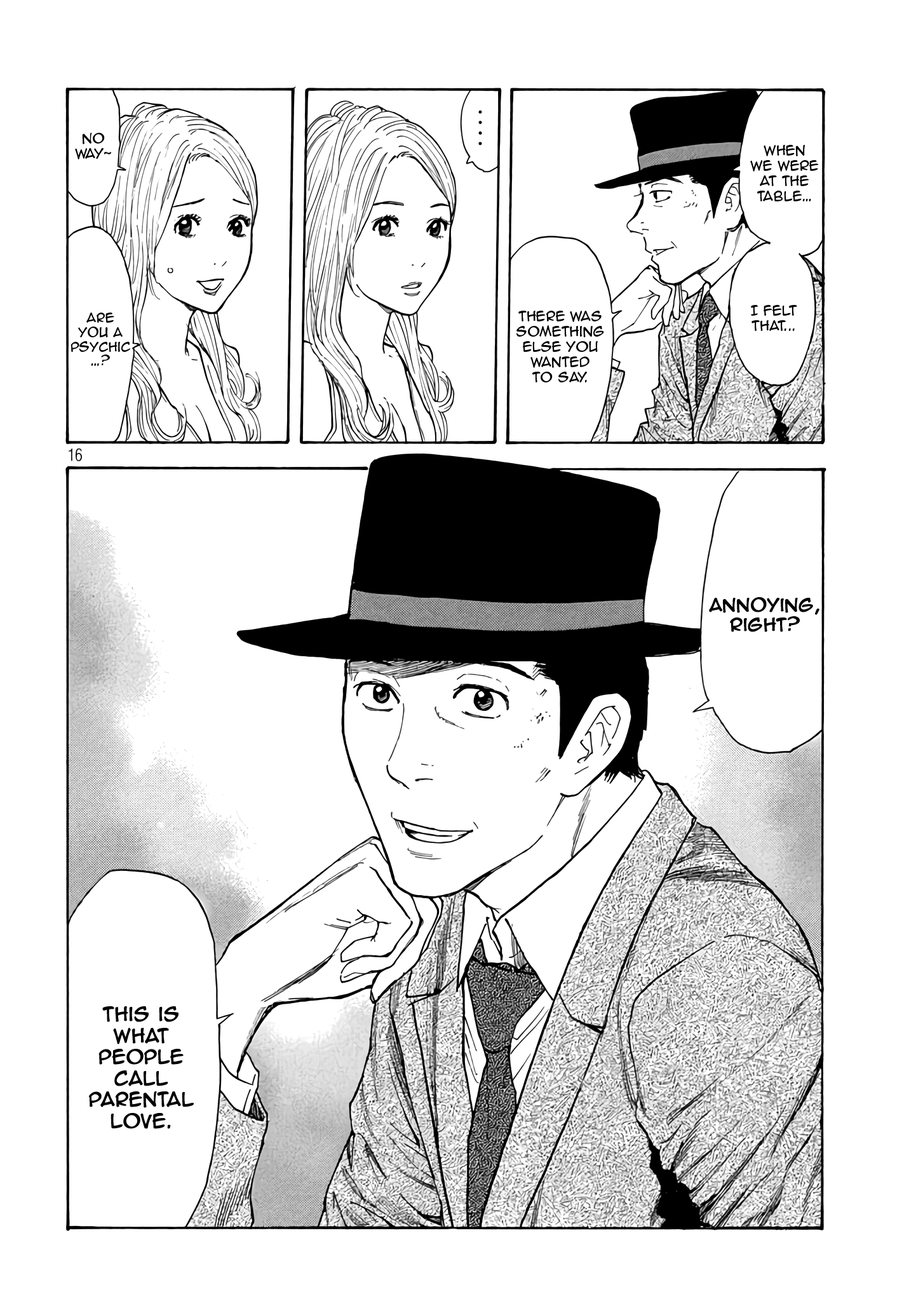
<style>
.page{position:relative;width:916px;height:1301px;background:#ffffff}
.page>*{position:absolute;margin:0}
.t1{font:12.7px "AnimeAce2.0BB";color:#000000}
.t2{font:12.1px "AnimeAce2.0BB";color:#000000}
.t3{font:16.5px "AnimeAce2.0BB";color:#000000;font-weight:bold}
.t4{font:17.8px "AnimeAce2.0BB";color:#000000;font-weight:bold}
</style>
<div class="page">
<p class="t1" style="left:75px;top:133px;width:36px;height:26px;text-align:center">no<br>way~</p>
<p class="t1" style="left:750px;top:145px;width:69px;height:56px;text-align:center">when<br>we were<br>at the<br>table…</p>
<p class="t1" style="left:751px;top:305px;width:46px;height:26px;text-align:center">I felt<br>that...</p>
<p class="t2" style="left:71px;top:313px;width:59px;height:53px;text-align:center">are<br>you a<br>psychic<br>…?</p>
<p class="t1" style="left:517px;top:311px;width:87px;height:72px;text-align:center">there was<br>something<br>else you<br>wanted<br>to say.</p>
<p class="t3" style="left:709px;top:597px;width:111px;height:35px;text-align:center">annoying,<br>right?</p>
<p class="t4" style="left:89px;top:1007px;width:105px;height:122px;text-align:center">this is<br>what<br>people<br>call<br>parental<br>love.</p>
</div>
